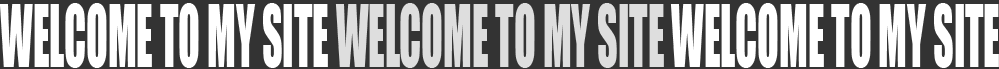
<style>
.page{position:relative;width:999px;height:69px;background:#ffffff}
.page>*{position:absolute;margin:0}
.t1{font:79.9px "Impact";color:#ffffff;scale:0.5 1}
.t2{font:79.9px "Impact";color:#dedede;scale:0.5 1}
</style>
<div class="page">
<p class="t1" style="left:0px;top:3px;width:999px;height:65px">WELCOME TO MY SITE <span class="t2">WELCOME TO MY SITE </span>WELCOME TO MY SITE</p>
</div>
